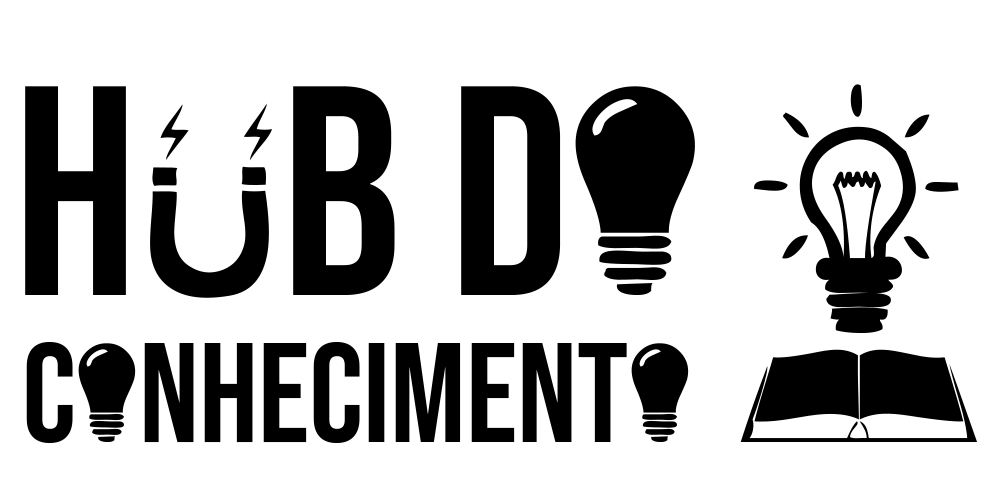
<style>
.page{position:relative;width:1000px;height:500px;background:#ffffff}
.page>*{position:absolute;margin:0}
.t1{font:298.1px "BebasNeue-Regular";color:#000000}
.t2{font:298.1px "ScienceIcons";color:#000000}
.t3{font:141px "BebasNeue-Regular";color:#000000}
.t4{font:141px "ScienceIcons";color:#000000}
</style>
<div class="page">
<p class="t1" style="left:25px;top:86px;width:670px;height:209px">h   b d<span class="t2">Á</span></p>
<p class="t3" style="left:26px;top:342px;width:663px;height:101px">c<span class="t4">Á</span>nheciment<span class="t4">Á</span></p>
</div>
